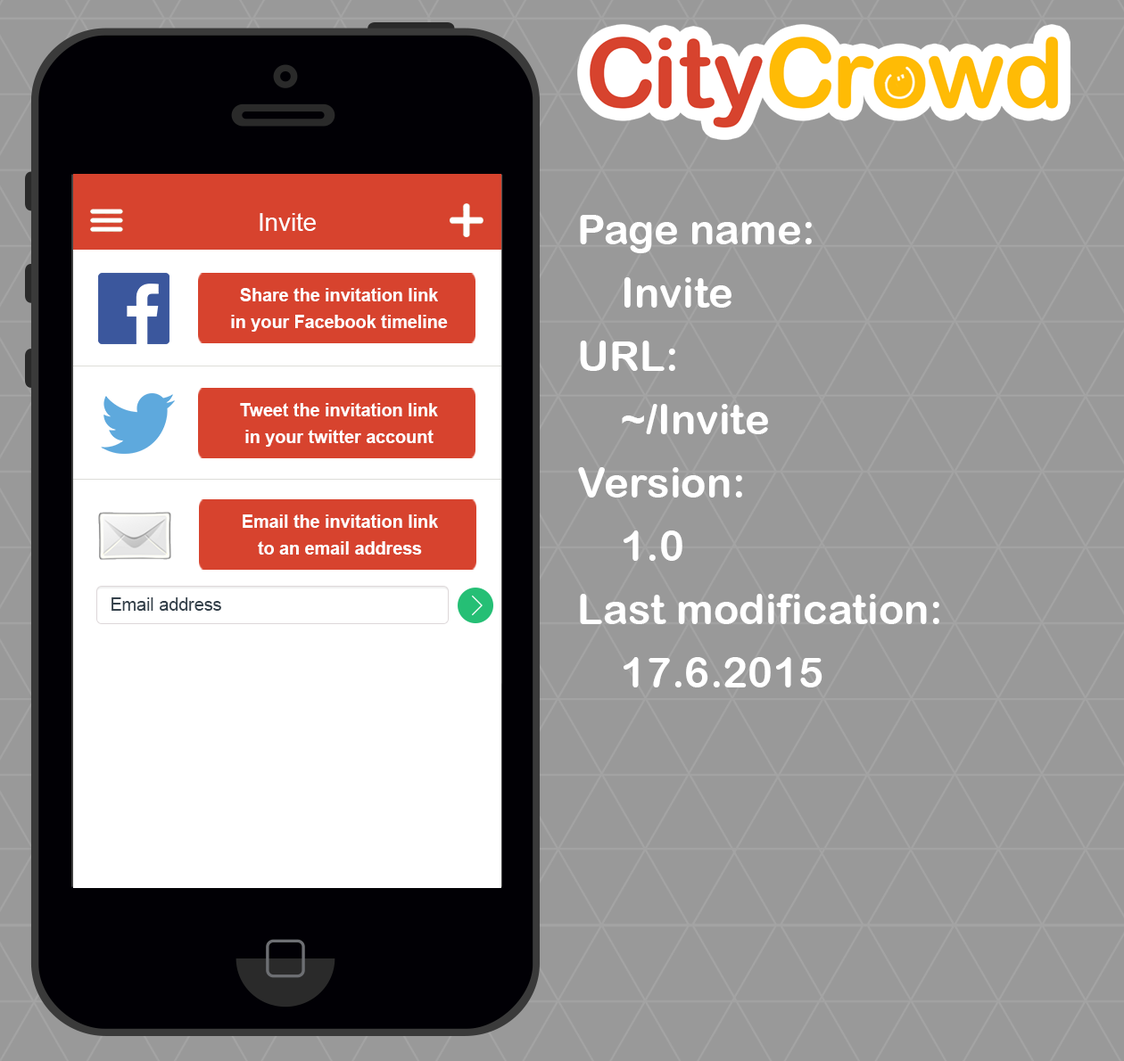
<style>
.page{position:relative;width:1124px;height:1061px;background:#999999}
.page>*{position:absolute;margin:0}
.t1{font:24.6px "ArialMT";color:#ffffff}
.t2{font:42.2px/63.3px "ArialRoundedMTBold";color:#ffffff}
.t3{font:17.6px/26.4px "Arial-BoldMT";color:#ffffff}
.t4{font:17.6px "ArialMT";color:#34414b}
</style>
<div class="page">
<p class="t1" style="left:260px;top:213px;width:56px;height:18px">Invite</p>
<p class="t2" style="left:578px;top:215px;width:361px;height:473px">Page name:<br>Invite<br>URL:<br>~/Invite<br>Version:<br>1.0<br>Last modification:<br>17.6.2015</p>
<p class="t3" style="left:231px;top:288px;width:217px;height:44px;text-align:center">Share the invitation link<br>in your Facebook timeline</p>
<p class="t3" style="left:240px;top:403px;width:198px;height:44px;text-align:center">Tweet the invitation link<br>in your twitter account</p>
<p class="t3" style="left:243px;top:515px;width:195px;height:40px;text-align:center">Email the invitation link<br>to an email address</p>
<p class="t4" style="left:111px;top:597px;width:110px;height:14px">Email address</p>
</div>
